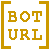
<style>
.page{position:relative;width:50px;height:50px;background:#ffffff}
.page>*{position:absolute;margin:0}
.t1{font:54.7px "SimSun";color:#cc9900;font-weight:bold;scale:0.74 1}
.t2{font:18px/18px "CourierNewPSMT";color:#cc9900;font-weight:bold}
</style>
<div class="page">
<p class="t1" style="left:1px;top:1px;width:48px;height:48px">[ ]</p>
<p class="t2" style="left:8px;top:11px;width:34px;height:29px;text-align:justify">BOT<br>URL</p>
</div>
